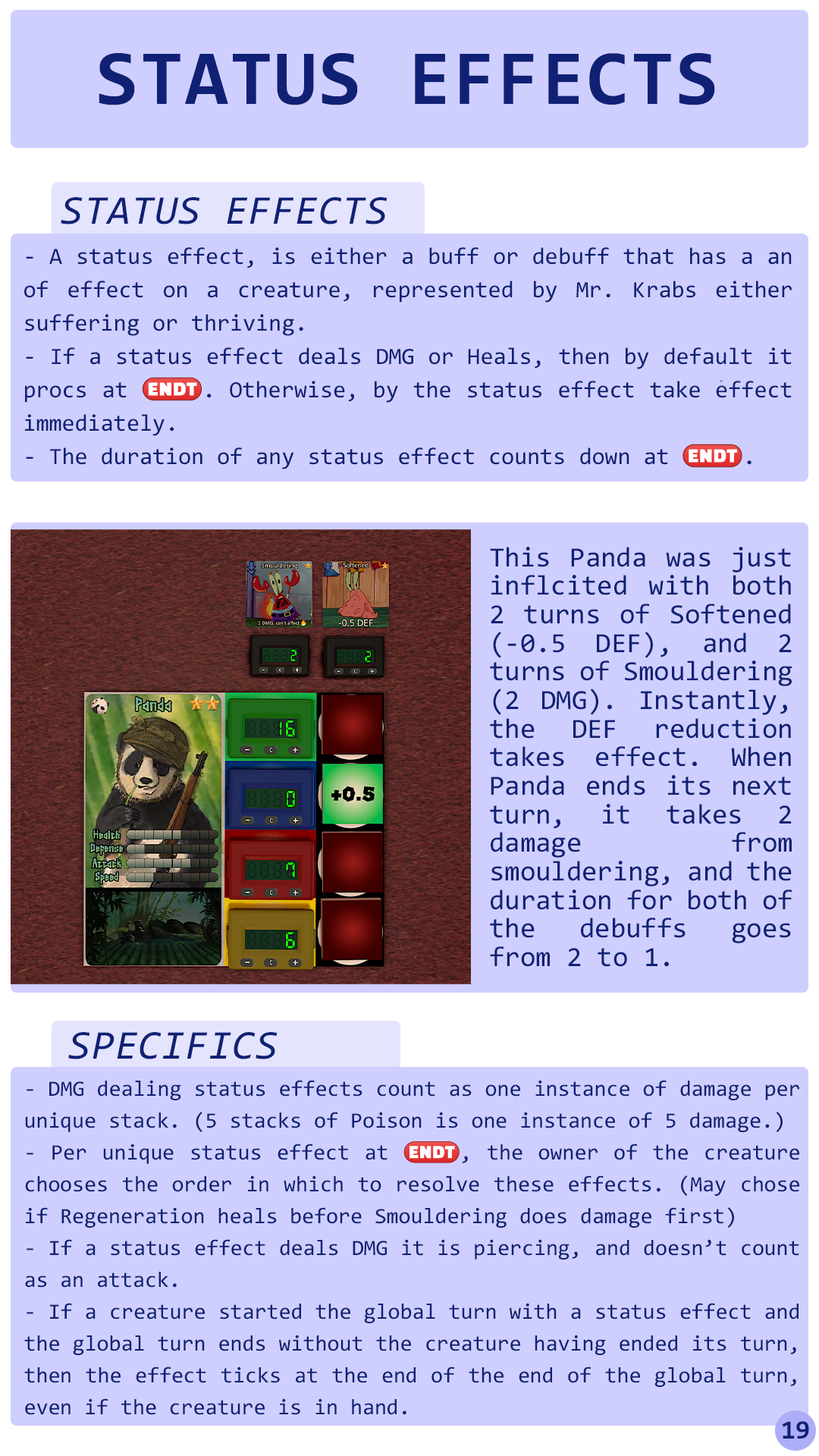
<style>
.page{position:relative;width:819px;height:1456px;background:#cfcfff}
.page>*{position:absolute;margin:0}
.t1{font:78.3px "Consolas-Bold";letter-spacing:0.02em;color:#102175}
.t2{font:41.1px "Consolas-Italic";letter-spacing:0.02em;color:#102175}
.t3{font:23.5px/33.4px "Consolas";color:#102175}
.t4{font:23.5px/33.4px "stoogedings-Regular";color:#102175}
.t5{font:28.1px/28.6px "Consolas";color:#102175}
.t6{font:22px/31.8px "Consolas";color:#102175}
.t7{font:22px/31.8px "stoogedings-Regular";color:#102175}
.t8{font:26.4px "Consolas-Bold";color:#102175}
</style>
<div class="page">
<p class="t1" style="left:99px;top:53px;width:616px;height:52px">STATUS EFFECTS</p>
<p class="t2" style="left:61px;top:197px;width:327px;height:27px">STATUS EFFECTS</p>
<p class="t3" style="left:24px;top:247px;width:768px;height:222px;text-align:justify">- A status effect, is either a buff or debuff that has a an of effect on a creature, represented by Mr. Krabs either suffering or thriving.<br>- If a status effect deals DMG or Heals, then by default it procs at <span class="t4">(ENDT)</span>. Otherwise, by the status effect take effect immediately.<br>- The duration of any status effect counts down at <span class="t4">(ENDT)</span>.</p>
<p class="t5" style="left:490px;top:547px;width:302px;height:420px;text-align:justify">This Panda was just inflcited with both 2 turns of Softened (-0.5 DEF), and 2 turns of Smouldering (2 DMG). Instantly, the DEF reduction takes effect. When Panda ends its next turn, it takes 2 damage from smouldering, and the duration for both of the debuffs goes from 2 to 1.</p>
<p class="t2" style="left:68px;top:1032px;width:210px;height:27px">SPECIFICS</p>
<p class="t6" style="left:24px;top:1080px;width:775px;height:335px;text-align:justify">- DMG dealing status effects count as one instance of damage per unique stack. (5 stacks of Poison is one instance of 5 damage.)<br>- Per unique status effect at <span class="t7">(ENDT)</span>, the owner of the creature chooses the order in which to resolve these effects. (May chose if Regeneration heals before Smouldering does damage first)<br>- If a status effect deals DMG it is piercing, and doesn’t count as an attack.<br>- If a creature started the global turn with a status effect and the global turn ends without the creature having ended its turn, then the effect ticks at the end of the end of the global turn, even if the creature is in hand.</p>
<p class="t8" style="left:782px;top:1421px;width:27px;height:18px">19</p>
</div>
